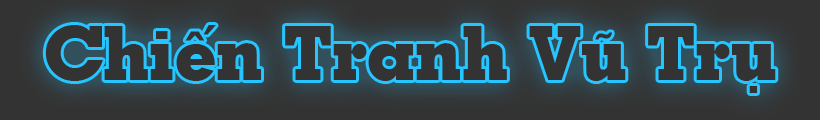
<style>
.page{position:relative;width:820px;height:120px;background:#333333}
.page>*{position:absolute;margin:0}
.t1{font:75px "GeoSlab703-Extra";color:#333333}
</style>
<div class="page">
<p class="t1" style="left:45px;top:25px;width:731px;height:68px">Chiến Tranh Vũ Trụ</p>
</div>
